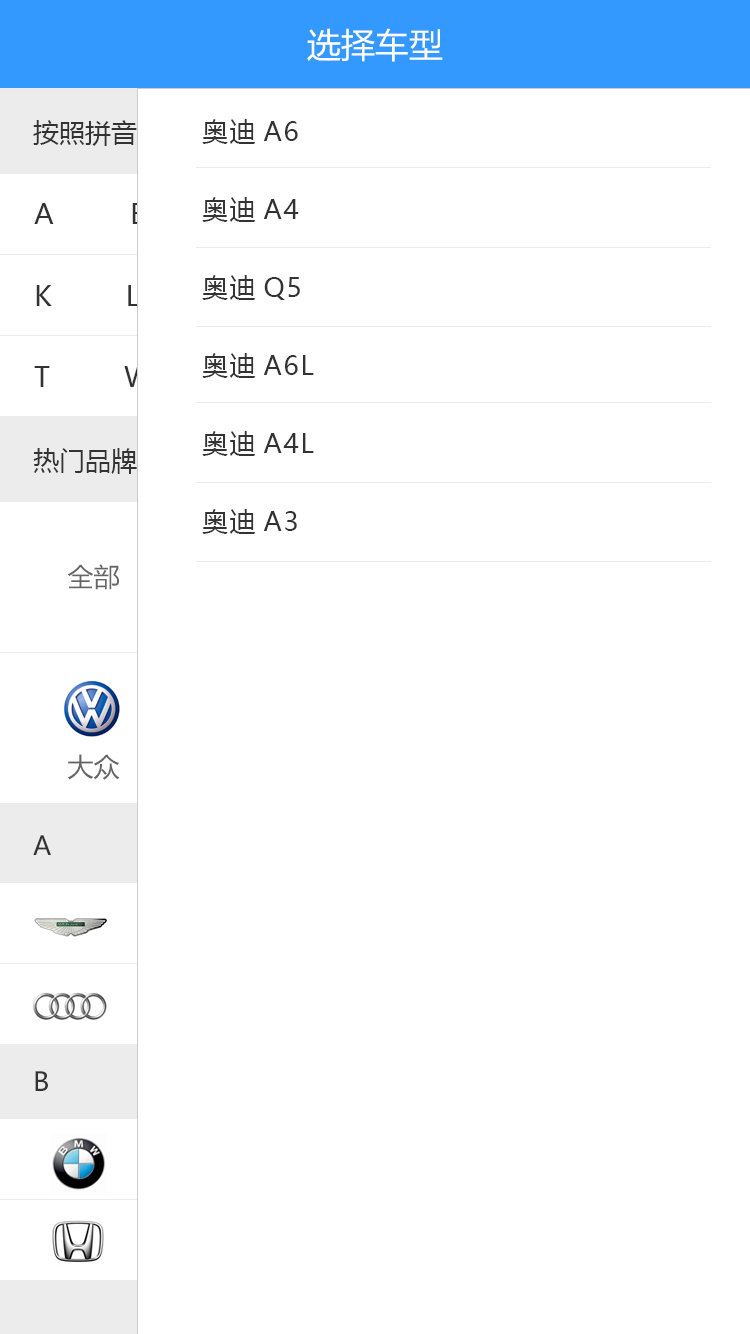
<style>
.page{position:relative;width:750px;height:1334px;background:#ffffff}
.page>*{position:absolute;margin:0}
.t1{font:34px "MicrosoftYaHei";color:#ffffff}
.t2{font:26px "MicrosoftYaHei"}
.t3{font:26px/78px "MicrosoftYaHei";letter-spacing:0.06em;color:#333333}
.t4{font:26px "MicrosoftYaHei";color:#333333}
.t5{font:26px "MicrosoftYaHei";color:#666666}
</style>
<div class="page">
<p class="t1" style="left:307px;top:28px;width:136px;height:34px">选择车型</p>
<p class="t2" style="left:33px;top:119px;width:234px;height:27px">按照拼音字母选品牌</p>
<p class="t3" style="left:202px;top:119px;width:112px;height:415px">奥迪A6<br>奥迪A4<br>奥迪Q5<br>奥迪A6L<br>奥迪A4L<br>奥迪A3</p>
<p class="t4" style="left:33px;top:448px;width:104px;height:26px">热门品牌</p>
<p class="t5" style="left:68px;top:564px;width:51px;height:26px">全部</p>
<p class="t5" style="left:68px;top:754px;width:52px;height:26px">大众</p>
<p class="t4" style="left:33px;top:835px;width:18px;height:20px">A</p>
<p class="t4" style="left:35px;top:1071px;width:13px;height:20px">B</p>
</div>
